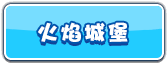
<style>
.page{position:relative;width:168px;height:64px;background:#22ccff}
.page>*{position:absolute;margin:0}
.t1{font:21.3px "DFPHaiBaoW12";letter-spacing:0.1em;color:#ffffff}
</style>
<div class="page">
<p class="t1" style="left:38px;top:22px;width:90px;height:20px">火焰城堡</p>
</div>
